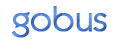
<style>
.page{position:relative;width:118px;height:43px;background:#ffffff}
.page>*{position:absolute;margin:0}
.t1{font:36px "KabelITCbyBT-Book";font-weight:bold}
</style>
<div class="page">
<p class="t1" style="left:12px;top:6px;width:95px;height:32px">gobus</p>
</div>
